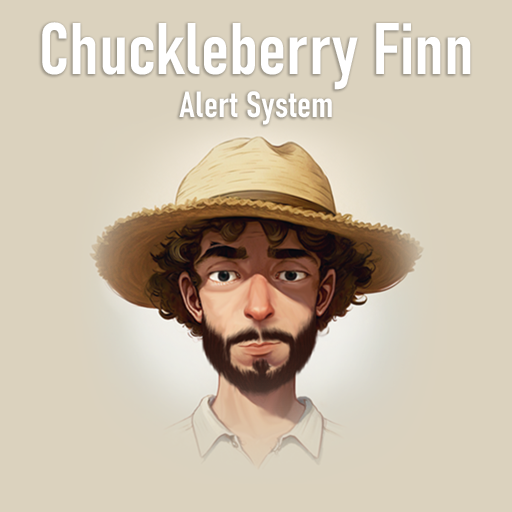
<style>
.page{position:relative;width:512px;height:512px;background:#dbd2be}
.page>*{position:absolute;margin:0}
.t1{font:72px "Bahnschrift-SemiBoldCondensed";color:#ffffff;font-weight:bold}
.t2{font:36px "Bahnschrift-SemiBoldCondensed";color:#ffffff;font-weight:bold}
</style>
<div class="page">
<p class="t1" style="left:42px;top:22px;width:429px;height:103px;text-align:center">Chuckleberry Finn<br><span class="t2">Alert System</span></p>
</div>
